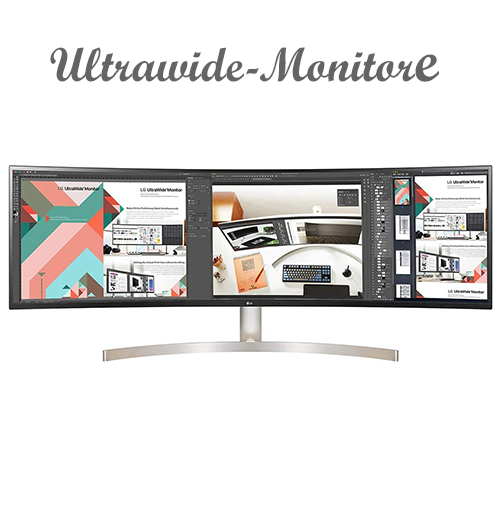
<style>
.page{position:relative;width:499px;height:526px;background:#ffffff}
.page>*{position:absolute;margin:0}
.t1{font:48px "ScriptMTBold";color:#656464}
.t2{font:64px "ScriptMTBold";color:#656464}
</style>
<div class="page">
<p class="t1" style="left:50px;top:47px;width:389px;height:35px">Ultrawide-Monitor<span class="t2">e</span></p>
</div>
